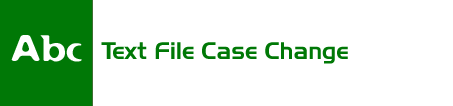
<style>
.page{position:relative;width:453px;height:106px;background:#ffffff}
.page>*{position:absolute;margin:0}
.t1{font:36px "Flexure";color:#ffffff}
.t2{font:24px "Slicker";color:#007806}
</style>
<div class="page">
<p class="t1" style="left:11px;top:35px;width:71px;height:27px">Abc</p>
<p class="t2" style="left:101px;top:42px;width:247px;height:22px">Text File Case Change</p>
</div>
